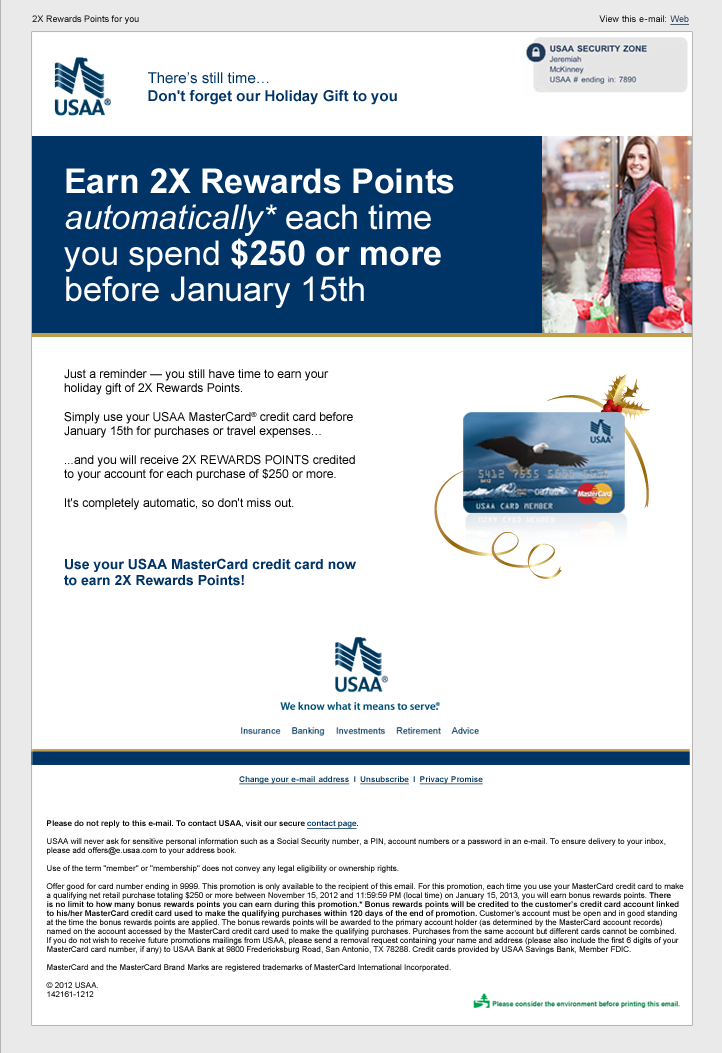
<style>
.page{position:relative;width:722px;height:1053px;background:#ffffff}
.page>*{position:absolute;margin:0}
.t1{font:9px "ArialMT"}
.t2{font:9px "ArialMT";color:#000000}
.t3{font:9px "ArialMT";letter-spacing:0.031em;color:#000000}
.t4{font:9px "ArialMT";letter-spacing:0.044em;color:#000000}
.t5{font:9px "ArialMT";letter-spacing:0.042em;color:#000000}
.t6{font:9px "ArialMT";letter-spacing:0.065em;color:#000000}
.t7{font:9px "ArialMT";letter-spacing:0.089em;color:#000000}
.t8{font:9px "ArialMT";color:#18314b;text-decoration:underline}
.t9{font:15px "Arial-BoldMT";color:#003366}
.t10{font:15px "ArialMT";color:#003366}
.t11{font:34px/36px "Arial-BoldMT";color:#ffffff}
.t12{font:34px/36px "Arial-ItalicMT";color:#ffffff}
.t13{font:34px/36px "ArialMT";color:#ffffff}
.t14{font:12px "ArialMT";color:#000000}
.t15{font:14px "Arial-BoldMT";color:#003366}
.t16{font:8px "Arial-BoldMT";color:#00365b;text-decoration:underline}
.t17{font:8px "Arial-BoldMT";letter-spacing:0.031em;color:#00365b;text-decoration:underline}
.t18{font:8px "Arial-BoldMT";letter-spacing:0.042em;color:#00365b;text-decoration:underline}
.t19{font:8px "Arial-BoldMT";letter-spacing:0.065em;color:#00365b;text-decoration:underline}
.t20{font:8px "Arial-BoldMT";letter-spacing:0.099em;color:#00365b;text-decoration:underline}
.t21{font:8px "Arial-BoldMT";color:#00365b}
.t22{font:8px "Arial-BoldMT";letter-spacing:0.041em;color:#00365b;text-decoration:underline}
.t23{font:8px/9px "ArialMT";color:#000000}
.t24{font:8px/9px "Arial-BoldMT";color:#000000}
.t25{font:8px/9px "Arial-BoldMT";color:#003366;text-decoration:underline}
.t26{font:8px/9px "Arial-BoldMT";color:#003366}
</style>
<div class="page">
<p class="t1" style="left:32px;top:15px;width:107px;height:9px">2X Rewards Points for you</p>
<p class="t2" style="left:599px;top:15px;width:90px;height:10px">Vie<span class="t3">w </span>thi<span class="t4">s </span><span class="t5">e</span><span class="t6">-</span>mail<span class="t7">: </span><span class="t8">Web</span></p>
<p class="t9" style="left:148px;top:72px;width:249px;height:33px"><span class="t10">There’s still time…<br></span>Don't forget our Holiday Gift to you</p>
<p class="t11" style="left:64px;top:168px;width:390px;height:140px">Earn 2X Rewards Points<br><span class="t12">automatically*</span><span class="t13"> each time<br>you spend </span>$250 or more<br><span class="t13">before January 15th</span></p>
<p class="t14" style="left:64px;top:369px;width:291px;height:141px">Just a reminder — you still have time to earn your <br>holiday gift of 2X Rewards Points. <br><br>Simply use your USAA MasterCard® credit card before <br>January 15th for purchases or travel expenses…<br><br>...and you will receive 2X REWARDS POINTS credited <br>to your account for each purchase of $250 or more.<br><br>It's completely automatic, so don't miss out.</p>
<p class="t15" style="left:64px;top:558px;width:292px;height:28px">Use your USAA MasterCard credit card now <br>to earn 2X Rewards Points!</p>
<p class="t16" style="left:239px;top:776px;width:244px;height:9px">Chang<span class="t17">e </span>you<span class="t17">r </span><span class="t18">e</span><span class="t19">-</span>mai<span class="t20">l </span>address<span class="t21">  I  </span>Unsubscribe<span class="t21">  I  </span>Privac<span class="t22">y </span>Promise</p>
<p class="t23" style="left:46px;top:820px;width:638px;height:177px"><span class="t24">Please do not reply to this e-mail. To contact USAA, visit our secure </span><span class="t25">contact page</span><span class="t26">.<br></span><br>USAA will never ask for sensitive personal information such as a Social Security number, a PIN, account numbers or a password in an e-mail. To ensure delivery to your inbox, <br>please add offers@e.usaa.com to your address book.<br><br>Use of the term "member" or "membership" does not convey any legal eligibility or ownership rights.<br><br>Offer good for card number ending in 9999. This promotion is only available to the recipient of this email. For this promotion, each time you use your MasterCard credit card to make <br>a qualifying net retail purchase totaling $250 or more between November 15, 2012 and 11:59:59 PM (local time) on January 15, 2013, you will earn bonus rewards points. <span class="t24">There <br>is no limit to how many bonus rewards points you can earn during this promotion.* Bonus rewards points will be credited to the customer’s credit card account linked <br>to his/her MasterCard credit card used to make the qualifying purchases within 120 days of the end of promotion. </span>Customer’s account must be open and in good standing <br>at the time the bonus rewards points are applied. The bonus rewards points will be awarded to the primary account holder (as determined by the MasterCard account records) <br>named on the account accessed by the MasterCard credit card used to make the qualifying purchases. Purchases from the same account but different cards cannot be combined.   <br>If you do not wish to receive future promotions mailings from USAA, please send a removal request containing your name and address (please also include the first 6 digits of your <br>MasterCard card number, if any) to USAA Bank at 9800 Fredericksburg Road, San Antonio, TX 78288. Credit cards provided by USAA Savings Bank, Member FDIC.<br><br>MasterCard and the MasterCard Brand Marks are registered trademarks of MasterCard International Incorporated.<br><br>© 2012 USAA. <br>142161-1212</p>
</div>
